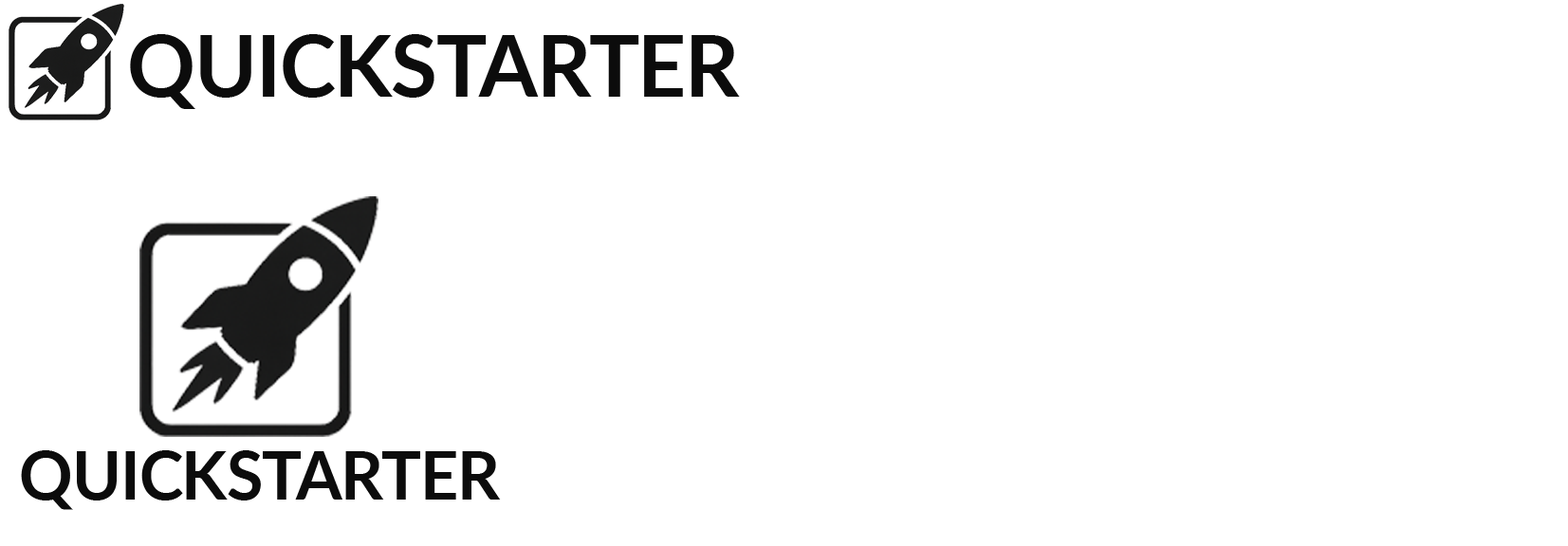
<style>
.page{position:relative;width:1568px;height:546px;background:#ffffff}
.page>*{position:absolute;margin:0}
.t1{font:84.1px "Lato-Bold";color:#0c0c0c}
.t2{font:66px "Lato-Bold";color:#0c0c0c}
</style>
<div class="page">
<p class="t1" style="left:130px;top:34px;width:610px;height:75px">QUICKSTARTER</p>
<p class="t2" style="left:21px;top:451px;width:480px;height:59px">QUICKSTARTER</p>
</div>
